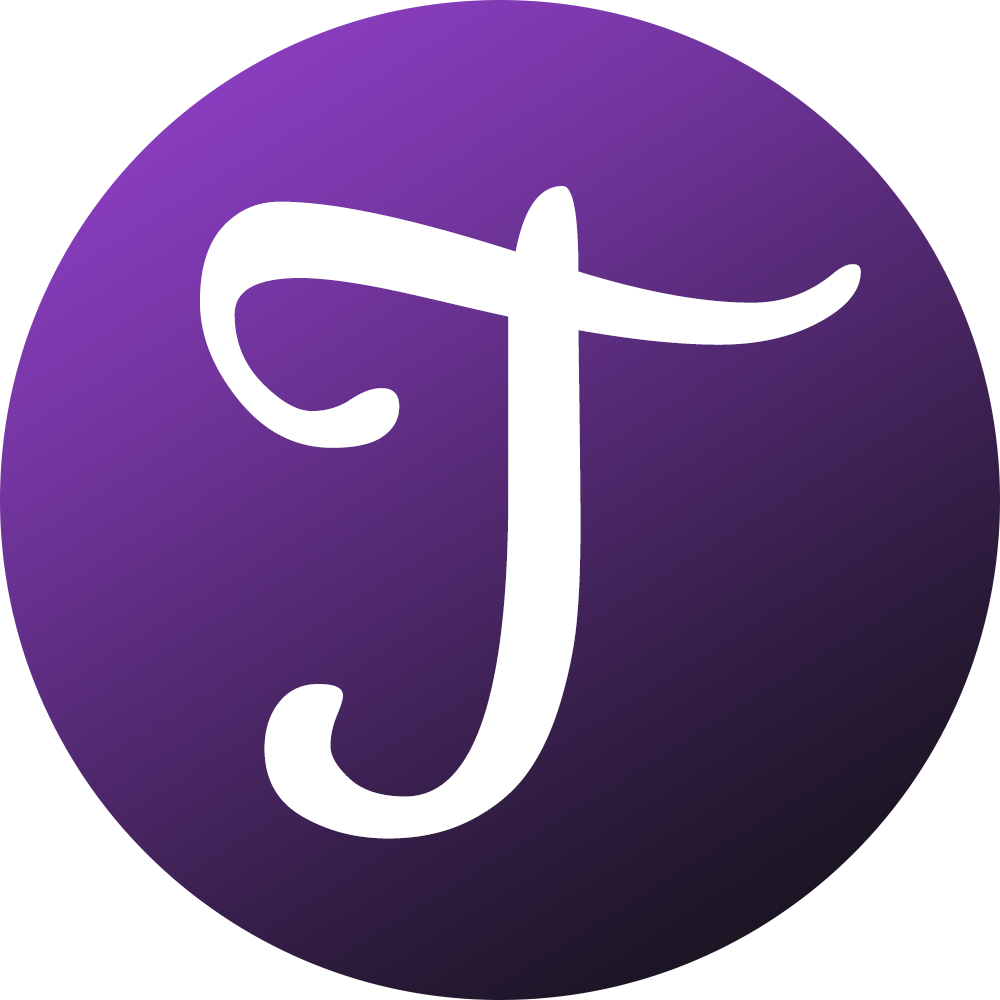
<style>
.page{position:relative;width:1000px;height:1000px;background:#ffffff}
.page>*{position:absolute;margin:0}
.t1{font:1041.7px "Cookie-Regular";color:#ffffff}
</style>
<div class="page">
<p class="t1" style="left:200px;top:186px;width:661px;height:653px">T</p>
</div>
